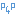
<style>
.page{position:relative;width:16px;height:16px;background:#ffffff}
.page>*{position:absolute;margin:0}
.t1{font:10px "AUdimat-Regular";color:#5797d5}
.t2{font:12px "AUdimat-Regular";color:#5797d5}
</style>
<div class="page">
<p class="t1" style="left:1px;top:3px;width:4px;height:7px">p</p>
<p class="t2" style="left:6px;top:6px;width:4px;height:8px">4</p>
<p class="t1" style="left:11px;top:3px;width:4px;height:7px">p</p>
</div>
